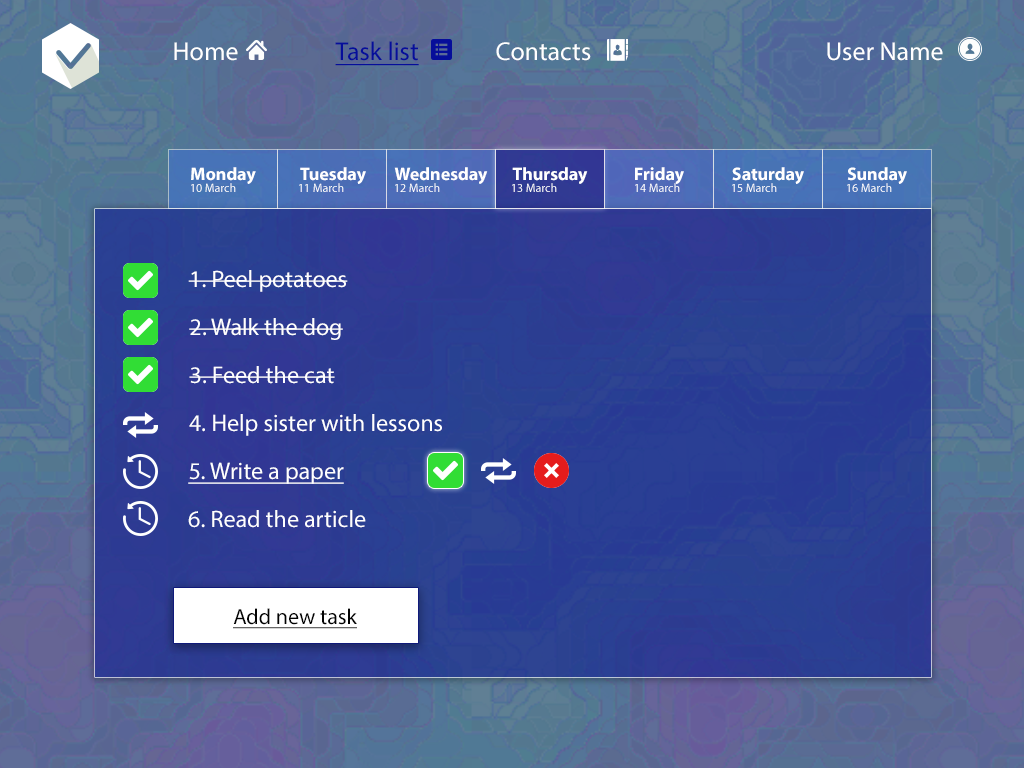
<style>
.page{position:relative;width:1024px;height:768px}
.page>*{position:absolute;margin:0}
.t1{font:26px "MyriadPro-Regular";color:#060e9a;text-decoration:underline}
.t2{font:26px "MyriadPro-Regular";color:#ffffff}
.t3{font:18px "MyriadPro-Bold";color:#ffffff}
.t4{font:12px "MyriadPro-Regular";color:#ffffff}
.t5{font:24px "MyriadPro-Regular";color:#ffffff}
.t6{font:24px "MyriadPro-Regular";color:#ffffff;text-decoration:underline}
.t7{font:22px "MyriadPro-Regular";color:#020202;text-decoration:underline}
</style>
<div class="page">
<p class="t1" style="left:335px;top:41px;width:84px;height:25px">Task list</p>
<p class="t2" style="left:174px;top:42px;width:64px;height:19px">Home</p>
<p class="t2" style="left:496px;top:42px;width:95px;height:19px">Contacts</p>
<p class="t2" style="left:827px;top:42px;width:116px;height:19px">User Name</p>
<p class="t3" style="left:191px;top:167px;width:65px;height:17px">Monday</p>
<p class="t3" style="left:300px;top:167px;width:66px;height:17px">Tuesday</p>
<p class="t3" style="left:394px;top:167px;width:94px;height:17px">Wednesday</p>
<p class="t3" style="left:512px;top:167px;width:76px;height:17px">Thursday</p>
<p class="t3" style="left:635px;top:167px;width:49px;height:17px">Friday</p>
<p class="t3" style="left:732px;top:167px;width:72px;height:17px">Saturday</p>
<p class="t3" style="left:847px;top:167px;width:60px;height:17px">Sunday</p>
<p class="t4" style="left:191px;top:183px;width:45px;height:9px">10 March</p>
<p class="t4" style="left:299px;top:183px;width:45px;height:9px">11 March</p>
<p class="t4" style="left:395px;top:183px;width:45px;height:9px">12 March</p>
<p class="t4" style="left:512px;top:183px;width:45px;height:9px">13 March</p>
<p class="t4" style="left:635px;top:183px;width:45px;height:9px">14 March</p>
<p class="t4" style="left:732px;top:183px;width:45px;height:9px">15 March</p>
<p class="t4" style="left:847px;top:183px;width:45px;height:9px">16 March</p>
<p class="t5" style="left:188px;top:270px;width:160px;height:22px">1. Peel potatoes</p>
<p class="t5" style="left:189px;top:318px;width:154px;height:22px">2. Walk the dog</p>
<p class="t5" style="left:189px;top:366px;width:146px;height:18px">3. Feed the cat</p>
<p class="t5" style="left:189px;top:414px;width:253px;height:22px">4. Help sister with lessons</p>
<p class="t6" style="left:188px;top:462px;width:156px;height:22px">5. Write a paper</p>
<p class="t5" style="left:188px;top:510px;width:178px;height:18px">6. Read the article</p>
<p class="t7" style="left:233px;top:608px;width:124px;height:21px">Add new task</p>
</div>
